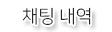
<style>
.page{position:relative;width:112px;height:32px;background:#ffffff}
.page>*{position:absolute;margin:0}
.t1{font:18px "NanumSquareL";color:#000000}
</style>
<div class="page">
<p class="t1" style="left:22px;top:7px;width:69px;height:18px">채팅 내역</p>
</div>
